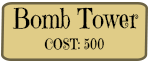
<style>
.page{position:relative;width:150px;height:63px;background:#e0cc87}
.page>*{position:absolute;margin:0}
.t1{font:27.4px "EmilysCandy-Regular";color:#000000;scale:0.83 1}
.t2{font:14.5px "EmilysCandy-Regular";color:#000000;scale:0.83 1}
</style>
<div class="page">
<p class="t1" style="left:12px;top:7px;width:127px;height:22px">Bomb Tower</p>
<p class="t2" style="left:44px;top:37px;width:60px;height:13px">COST: 500</p>
</div>
